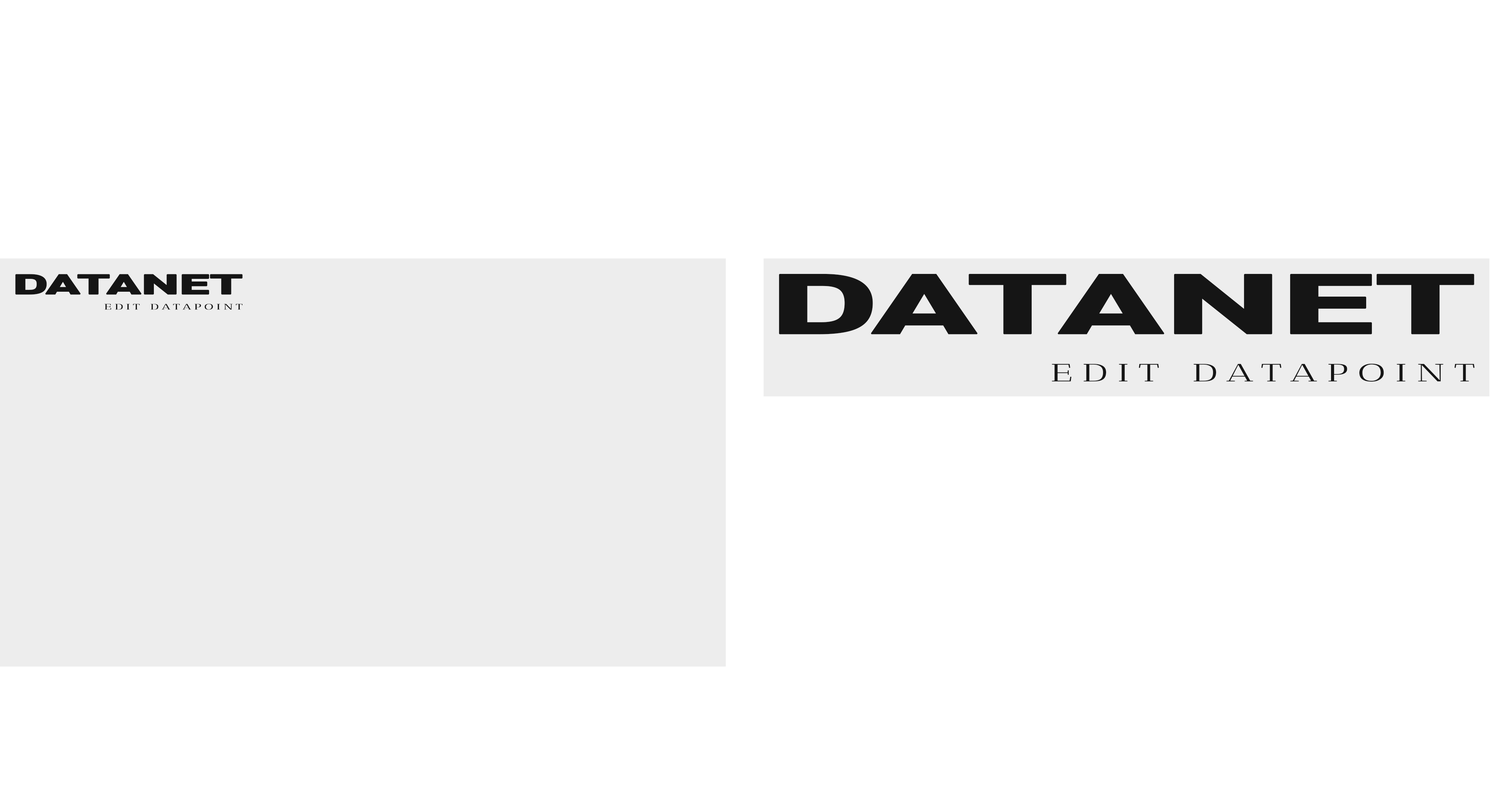
<style>
.page{position:relative;width:1500px;height:795px;background:#ffffff}
.page>*{position:absolute;margin:0}
.t1{font:27.5px "Sarabun-ExtraBold";letter-spacing:-0.04em;color:#151515;text-transform:uppercase;font-weight:bold;scale:1.99 1}
.t2{font:84.5px "Sarabun-ExtraBold";letter-spacing:-0.04em;color:#151515;text-transform:uppercase;font-weight:bold;scale:1.99 1}
.t3{font:7.9px "AnticDidone-Regular";letter-spacing:0.22em;color:#151515;font-weight:bold;scale:1.68 1}
.t4{font:24.4px "AnticDidone-Regular";letter-spacing:0.22em;color:#151515;font-weight:bold;scale:1.68 1}
</style>
<div class="page">
<p class="t1" style="left:15px;top:274px;width:228px;height:21px">DATANET</p>
<p class="t2" style="left:779px;top:274px;width:695px;height:60px">DATANET</p>
<p class="t3" style="left:104px;top:304px;width:139px;height:6px">EDIT DATAPOINT</p>
<p class="t4" style="left:1051px;top:364px;width:423px;height:18px">EDIT DATAPOINT</p>
</div>
